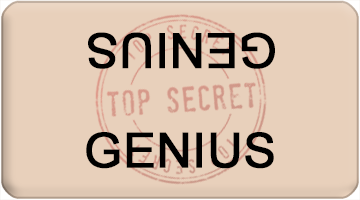
<style>
.page{position:relative;width:360px;height:200px;background:#e8d0bb}
.page>*{position:absolute;margin:0}
.t1{font:48px "ArialMT";color:#000000;font-weight:bold}
</style>
<div class="page">
<p class="t1" style="left:88px;top:32px;width:187px;height:37px;rotate:180deg">GENIUS</p>
<p class="t1" style="left:86px;top:132px;width:188px;height:37px">GENIUS</p>
</div>
